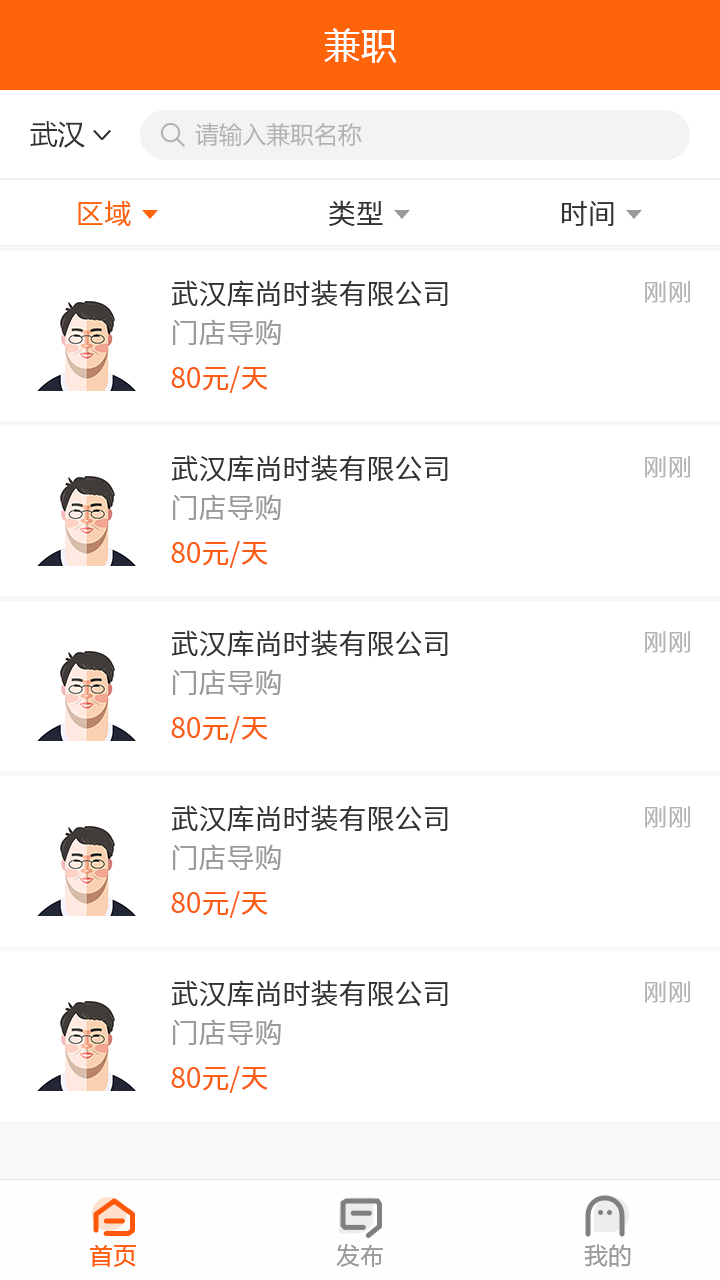
<style>
.page{position:relative;width:720px;height:1280px;background:#ffffff}
.page>*{position:absolute;margin:0}
.t1{font:36px "MicrosoftYaHei";letter-spacing:0.03em;color:#ffffff}
.t2{font:28px "MicrosoftYaHei";color:#333333}
.t3{font:24px "MicrosoftYaHei";color:#b2b2b2}
.t4{font:28px "NotoSansCJKsc-DemiLight";color:#ff640a;font-variant:small-caps}
.t5{font:28px "NotoSansCJKsc-DemiLight";color:#333333;font-variant:small-caps}
.t6{font:24px "NotoSansCJKsc-DemiLight";letter-spacing:0.03em;color:#b3b3b3;font-variant:small-caps}
.t7{font:28px "NotoSansCJKsc-DemiLight";color:#999999;font-variant:small-caps}
.t8{font:28px "NotoSansCJKsc-Regular";color:#fb5d15;font-variant:small-caps}
.t9{font:24px "FZLTHJW--GB1-0";color:#ff580a}
.t10{font:24px "FZLTHJW--GB1-0";color:#999999}
</style>
<div class="page">
<p class="t1" style="left:324px;top:28px;width:73px;height:35px">兼职</p>
<p class="t2" style="left:30px;top:121px;width:55px;height:27px">武汉</p>
<p class="t3" style="left:195px;top:123px;width:167px;height:24px">请输入兼职名称</p>
<p class="t4" style="left:78px;top:200px;width:53px;height:26px">区域</p>
<p class="t5" style="left:329px;top:200px;width:54px;height:26px">类型</p>
<p class="t5" style="left:562px;top:200px;width:52px;height:27px">时间</p>
<p class="t5" style="left:172px;top:280px;width:276px;height:27px">武汉库尚时装有限公司</p>
<p class="t6" style="left:645px;top:281px;width:45px;height:22px">刚刚</p>
<p class="t7" style="left:173px;top:319px;width:108px;height:26px">门店导购</p>
<p class="t8" style="left:171px;top:365px;width:97px;height:28px">80元/天</p>
<p class="t5" style="left:172px;top:455px;width:276px;height:27px">武汉库尚时装有限公司</p>
<p class="t6" style="left:645px;top:456px;width:45px;height:22px">刚刚</p>
<p class="t7" style="left:173px;top:494px;width:108px;height:26px">门店导购</p>
<p class="t8" style="left:171px;top:540px;width:97px;height:28px">80元/天</p>
<p class="t5" style="left:172px;top:630px;width:276px;height:27px">武汉库尚时装有限公司</p>
<p class="t6" style="left:645px;top:631px;width:45px;height:22px">刚刚</p>
<p class="t7" style="left:173px;top:669px;width:108px;height:26px">门店导购</p>
<p class="t8" style="left:171px;top:715px;width:97px;height:28px">80元/天</p>
<p class="t5" style="left:172px;top:805px;width:276px;height:27px">武汉库尚时装有限公司</p>
<p class="t6" style="left:645px;top:806px;width:45px;height:22px">刚刚</p>
<p class="t7" style="left:173px;top:844px;width:108px;height:26px">门店导购</p>
<p class="t8" style="left:171px;top:890px;width:97px;height:28px">80元/天</p>
<p class="t5" style="left:172px;top:980px;width:276px;height:27px">武汉库尚时装有限公司</p>
<p class="t6" style="left:645px;top:981px;width:45px;height:22px">刚刚</p>
<p class="t7" style="left:173px;top:1019px;width:108px;height:26px">门店导购</p>
<p class="t8" style="left:171px;top:1065px;width:97px;height:28px">80元/天</p>
<p class="t9" style="left:90px;top:1244px;width:46px;height:23px">首页</p>
<p class="t10" style="left:336px;top:1244px;width:47px;height:23px">发布</p>
<p class="t10" style="left:584px;top:1244px;width:47px;height:23px">我的</p>
</div>
